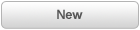
<style>
.page{position:relative;width:140px;height:30px}
.page>*{position:absolute;margin:0}
.t1{font:13px "Arial-BoldMT";letter-spacing:-0.025em;color:#555555}
</style>
<div class="page">
<p class="t1" style="left:57px;top:9px;width:26px;height:10px">New</p>
</div>
